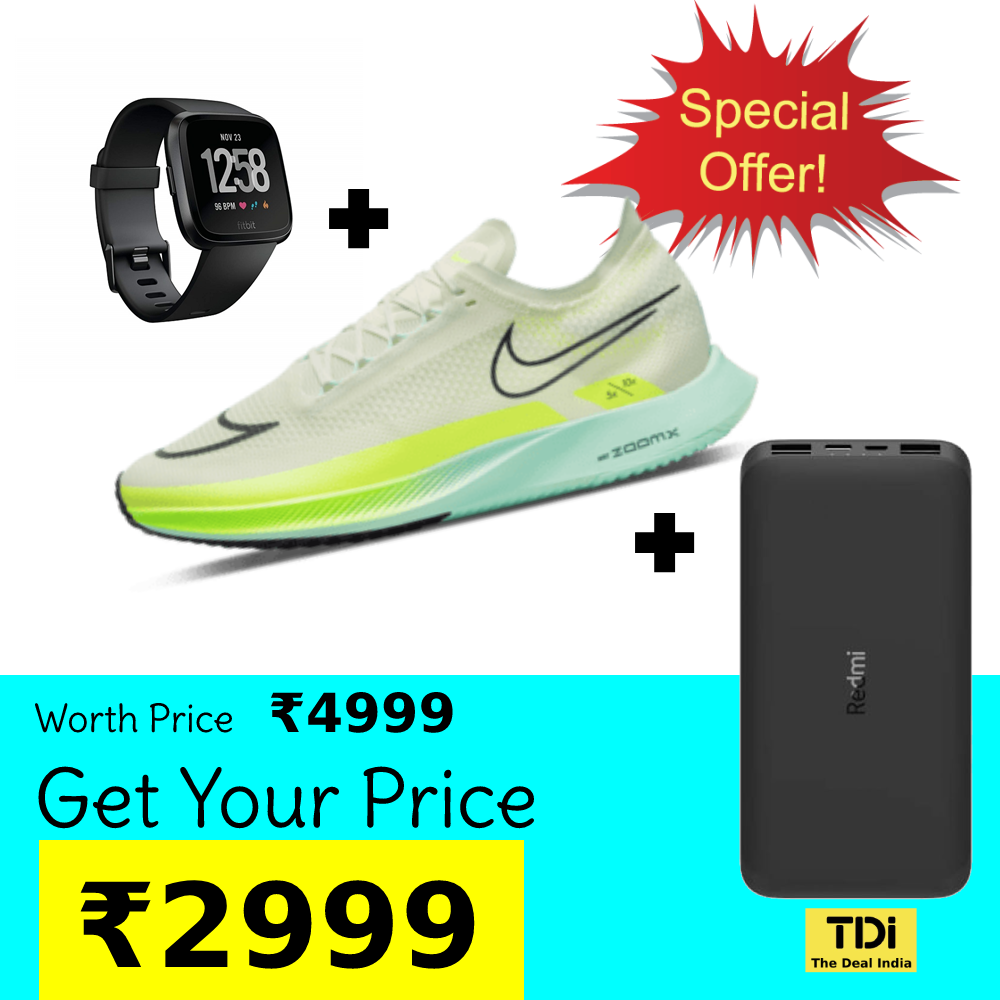
<style>
.page{position:relative;width:1000px;height:1000px;background:#ffffff}
.page>*{position:absolute;margin:0}
.t1{font:107px "DelaGothicOne-Regular";color:#000000}
.t2{font:79px "Delius-Regular";color:#000000}
.t3{font:38px "Delius-Regular";color:#000000}
.t4{font:54px "DejaVuSans-Bold";color:#000000}
.t5{font:117px "DejaVuSans-Bold";color:#000000}
</style>
<div class="page">
<p class="t1" style="left:329px;top:188px;width:60px;height:61px">+</p>
<p class="t1" style="left:635px;top:512px;width:60px;height:61px">+</p>
<p class="t2" style="left:35px;top:691px;width:499px;height:278px"><span class="t3">Worth Price  </span><span class="t4">₹4999<br></span>Get Your Price <br><span class="t5"> ₹2999</span></p>
</div>
